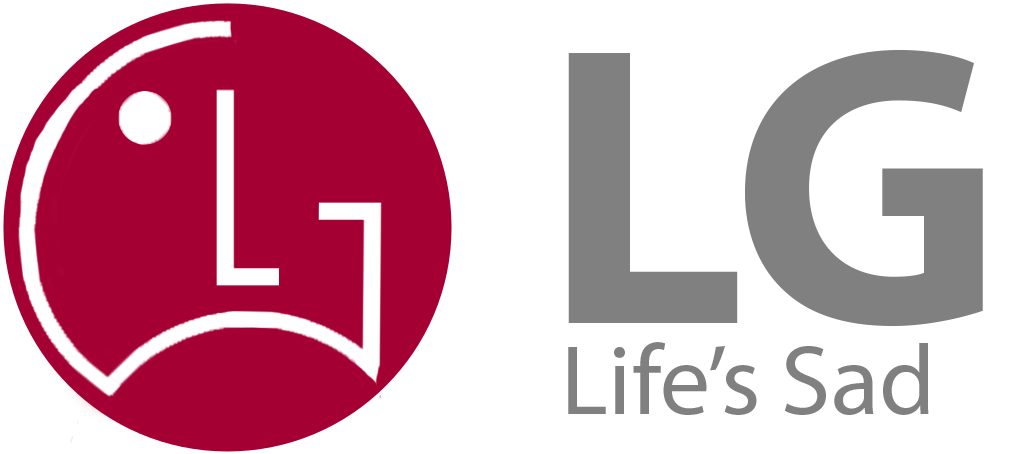
<style>
.page{position:relative;width:1024px;height:454px;background:#ffffff}
.page>*{position:absolute;margin:0}
.t1{font:400px "MyriadPro-Bold";color:#808080}
.t2{font:100px "MyriadPro-Regular";color:#808080}
</style>
<div class="page">
<p class="t1" style="left:568px;top:49px;width:415px;height:277px">LG</p>
<p class="t2" style="left:568px;top:342px;width:361px;height:73px">Life’s Sad</p>
</div>
